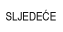
<style>
.page{position:relative;width:63px;height:32px;background:#ffffff}
.page>*{position:absolute;margin:0}
.t1{font:12px "ArialNarrow";color:#151515}
</style>
<div class="page">
<p class="t1" style="left:6px;top:9px;width:50px;height:12px">SLJEDEĆE</p>
</div>
